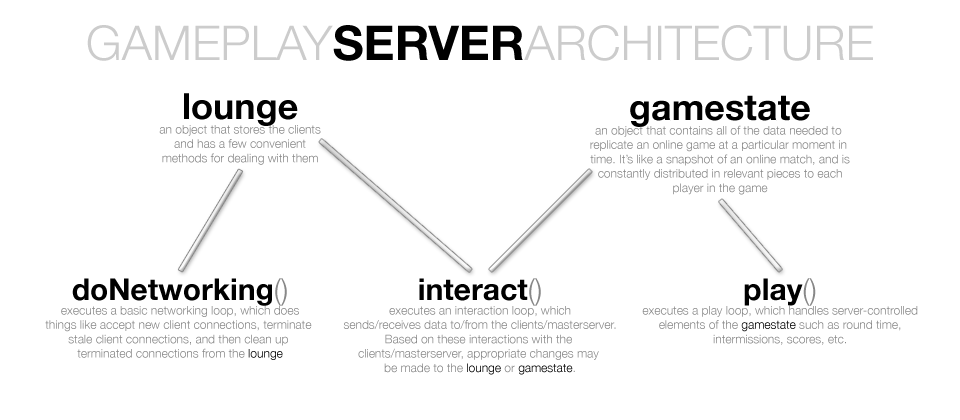
<style>
.page{position:relative;width:960px;height:420px;background:#ffffff}
.page>*{position:absolute;margin:0}
.t1{font:48px "HelveticaNeue-Light";color:#cccccc}
.t2{font:48px "HelveticaNeue-Bold";color:#000000}
.t3{font:12px "HelveticaNeue-Light";color:#888888}
.t4{font:36px "HelveticaNeue-Bold";color:#000000}
.t5{font:30px "HelveticaNeue-Bold";color:#000000}
.t6{font:30px "HelveticaNeue-Light";color:#888888}
.t7{font:12px "HelveticaNeue-Light";color:#000000}
</style>
<div class="page">
<p class="t1" style="left:87px;top:25px;width:786px;height:36px">GAMEPLAY<span class="t2">SERVER</span>ARCHITECTURE</p>
<p class="t3" style="left:159px;top:93px;width:162px;height:72px;text-align:center"><span class="t4">lounge<br></span>an object that stores the clients<br>and has a few convenient<br>methods for dealing with them</p>
<p class="t3" style="left:590px;top:95px;width:260px;height:100px;text-align:center"><span class="t4">gamestate<br></span>an object that contains all of the data needed to <br>replicate an online game at a particular moment in <br>time. It’s like a snapshot of an online match, and is<br>constantly distributed in relevant pieces to each<br>player in the game</p>
<p class="t3" style="left:45px;top:278px;width:267px;height:82px;text-align:center"><span class="t5">doNetworking</span><span class="t6">()<br></span>executes a basic networking loop, which does<br>things like accept new client connections, terminate <br>stale client connections, and then clean up <br>terminated connections from the <span class="t7">lounge</span></p>
<p class="t3" style="left:343px;top:278px;width:273px;height:97px;text-align:center"><span class="t5">interact</span><span class="t6">()<br></span>executes an interaction loop, which<br>sends/receives data to/from the clients/masterserver.<br>Based on these interactions with the <br>clients/masterserver, appropriate changes may <br>be made to the <span class="t7">lounge </span>or <span class="t7">gamestate</span>.</p>
<p class="t3" style="left:642px;top:278px;width:276px;height:67px;text-align:center"><span class="t5">play</span><span class="t6">()<br></span>executes a play loop, which handles server-controlled<br>elements of the <span class="t7">gamestate </span>such as round time,<br>intermissions, scores, etc.</p>
</div>
